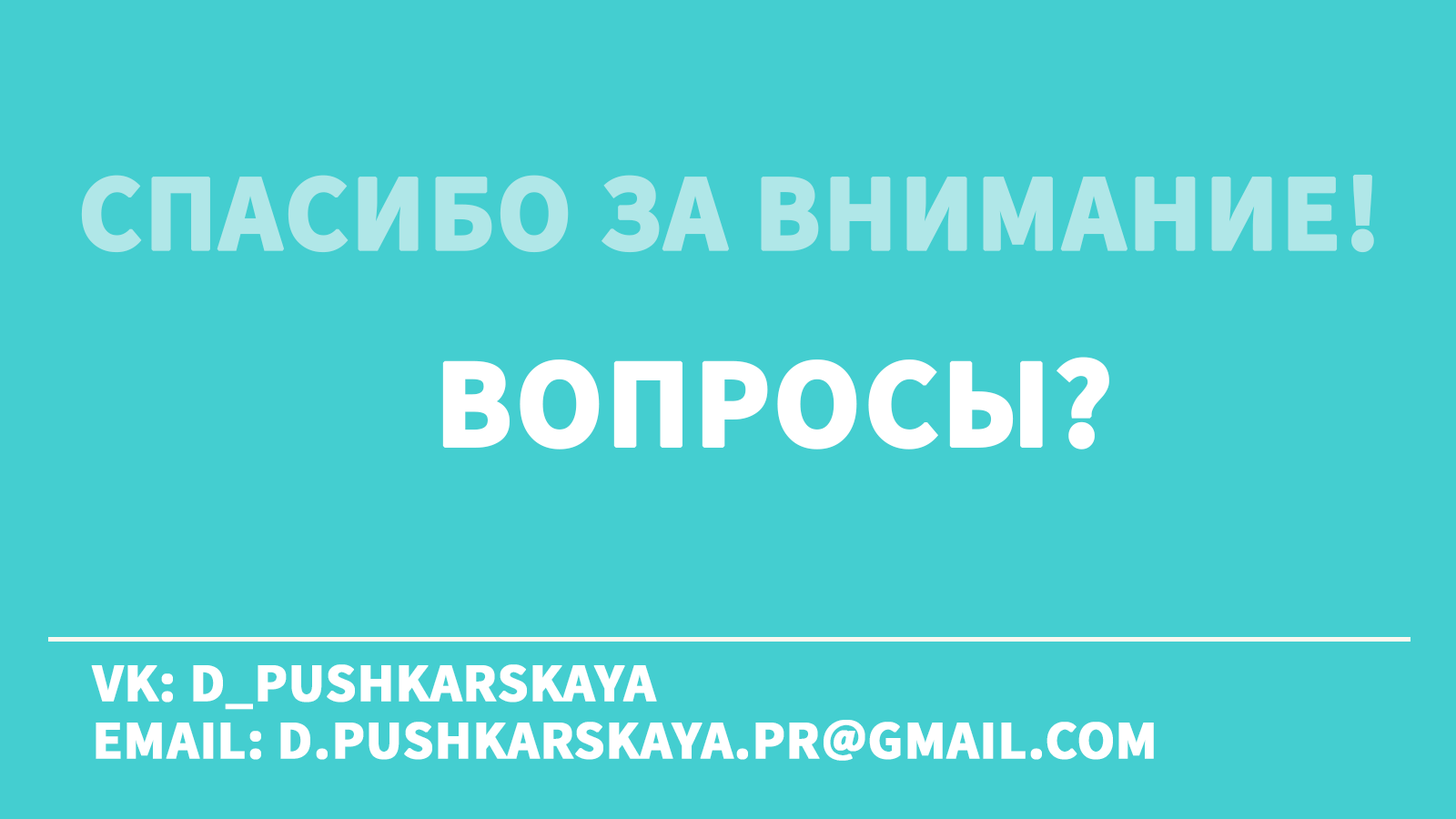
<style>
.page{position:relative;width:1456px;height:819px;background:#44ced0}
.page>*{position:absolute;margin:0}
.t1{font:109.2px "SourceSansPro-Bold";color:#b0e7e8;text-transform:uppercase;font-weight:bold}
.t2{font:127.4px "SourceSansPro-Bold";color:#ffffff;text-transform:uppercase;font-weight:bold}
.t3{font:54.6px "SourceSansPro-Bold";color:#ffffff;text-transform:uppercase;font-weight:bold}
</style>
<div class="page">
<p class="t1" style="left:81px;top:174px;width:1293px;height:79px">Спасибо за внимание!</p>
<p class="t2" style="left:442px;top:357px;width:667px;height:93px">Вопросы?</p>
<p class="t3" style="left:91px;top:664px;width:566px;height:46px">vk: d_pushkarskaya</p>
<p class="t3" style="left:96px;top:720px;width:1058px;height:41px">email: d.pushkarskaya.pr@gmail.com</p>
</div>
